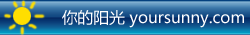
<style>
.page{position:relative;width:250px;height:35px}
.page>*{position:absolute;margin:0}
.t1{font:15.8px "MicrosoftYaHei";color:#ffffff}
</style>
<div class="page">
<p class="t1" style="left:62px;top:10px;width:182px;height:18px">你的阳光 yoursunny.com</p>
</div>
